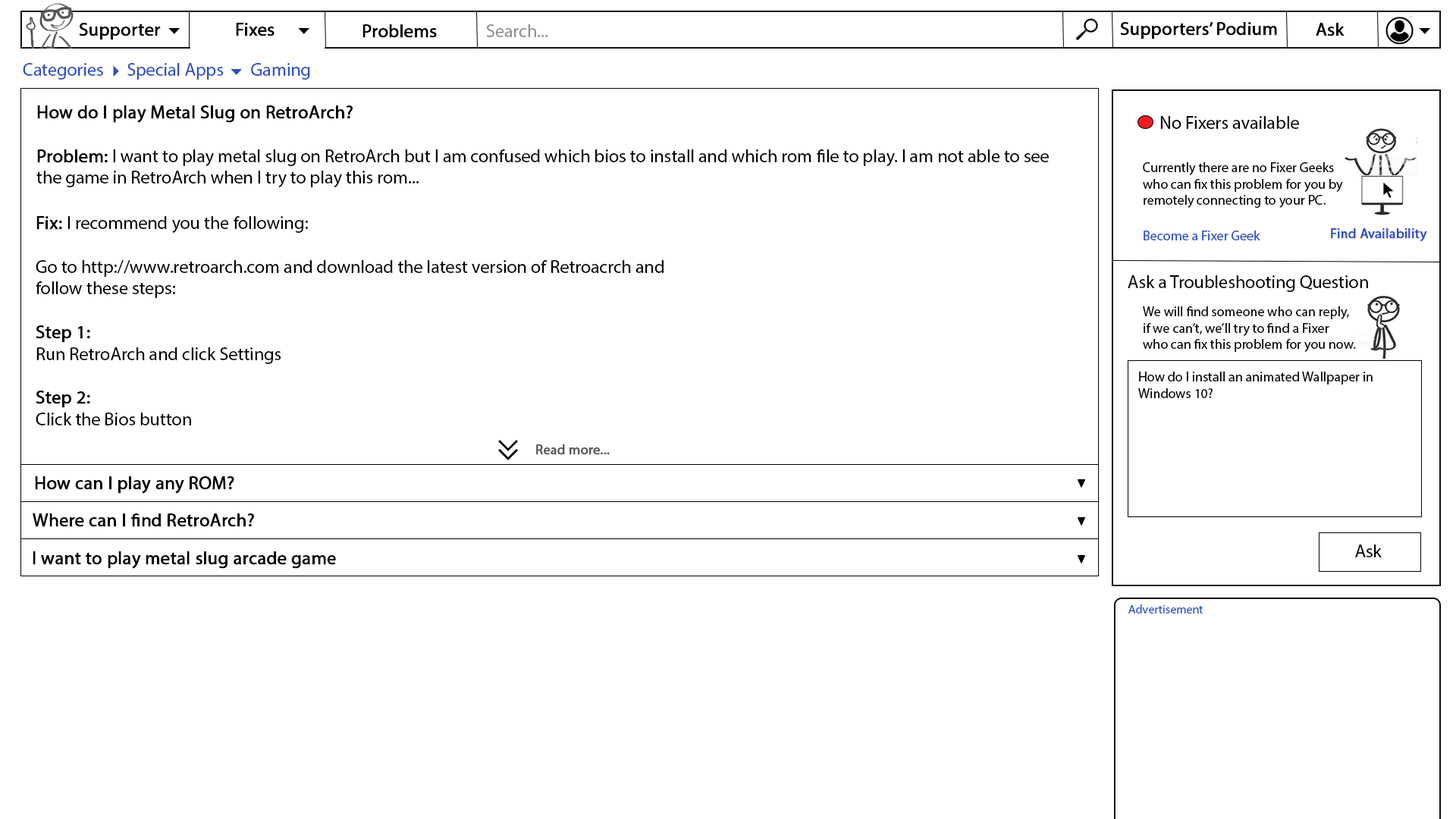
<style>
.page{position:relative;width:1456px;height:819px;background:#ffffff}
.page>*{position:absolute;margin:0}
.t1{font:18.2px "MyriadPro-Regular";color:#000000;font-weight:bold}
.t2{font:18.2px "MyriadPro-Regular";color:#919090}
.t3{font:18.2px "MyriadPro-Regular";color:#010000;font-weight:bold}
.t4{font:18.2px "MyriadPro-Regular";color:#2d4fc9}
.t5{font:18.2px "MyriadPro-Regular";color:#000000}
.t6{font:13.6px "MyriadPro-Regular";color:#000000}
.t7{font:13.6px "MyriadPro-Regular";color:#2d4fc9}
.t8{font:13.6px "MyriadPro-Regular";color:#2d4fc9;font-weight:bold}
.t9{font:13.6px "MyriadPro-Regular";color:#555555;font-weight:bold}
.t10{font:12.1px "MyriadPro-Regular";color:#2d4fc9}
</style>
<div class="page">
<p class="t1" style="left:79px;top:23px;width:82px;height:17px">Supporter</p>
<p class="t1" style="left:236px;top:23px;width:39px;height:13px">Fixes</p>
<p class="t1" style="left:362px;top:24px;width:75px;height:14px">Problems</p>
<p class="t2" style="left:486px;top:24px;width:62px;height:13px">Search...</p>
<p class="t3" style="left:1120px;top:22px;width:157px;height:17px">Supporters’ Podium</p>
<p class="t1" style="left:1316px;top:23px;width:29px;height:13px">Ask</p>
<p class="t4" style="left:23px;top:63px;width:287px;height:17px">Categories      Special Apps       Gaming</p>
<p class="t5" style="left:36px;top:105px;width:1013px;height:82px"><span class="t1">How do I play Metal Slug on RetroArch?<br><br>Problem:</span> I want to play metal slug on RetroArch but I am confused which bios to install and which rom file to play. I am not able to see<br>the game in RetroArch when I try to play this rom...</p>
<p class="t5" style="left:1160px;top:116px;width:139px;height:13px">No Fixers available</p>
<p class="t6" style="left:1143px;top:162px;width:200px;height:46px">Currently there are no Fixer Geeks<br>who can fix this problem for you by<br>remotely connecting to your PC.</p>
<p class="t5" style="left:36px;top:216px;width:628px;height:209px"><span class="t1">Fix: </span>I recommend you the following:<br><br>Go to http://www.retroarch.com and download the latest version of Retroacrch and<br>follow these steps:<br><br><span class="t1">Step 1:<br></span>Run RetroArch and click Settings<br><br><span class="t1">Step 2:<br></span>Click the Bios button</p>
<p class="t7" style="left:1144px;top:231px;width:116px;height:9px">Become a Fixer Geek</p>
<p class="t8" style="left:1331px;top:228px;width:96px;height:14px">Find Availability</p>
<p class="t5" style="left:1128px;top:275px;width:240px;height:17px">Ask a Troubleshooting Question</p>
<p class="t6" style="left:1143px;top:306px;width:213px;height:46px">We will find someone who can reply,<br>if we can’t, we’ll try to find a Fixer<br>who can fix this problem for you now.</p>
<p class="t6" style="left:1138px;top:372px;width:235px;height:26px">How do I install an animated Wallpaper in <br>Windows 10?</p>
<p class="t9" style="left:536px;top:444px;width:74px;height:11px">Read more...</p>
<p class="t1" style="left:35px;top:476px;width:199px;height:18px">How can I play any ROM?</p>
<p class="t1" style="left:33px;top:513px;width:221px;height:14px">Where can I find RetroArch?</p>
<p class="t5" style="left:1355px;top:544px;width:27px;height:13px">Ask</p>
<p class="t1" style="left:33px;top:551px;width:303px;height:18px">I want to play metal slug arcade game</p>
<p class="t10" style="left:1128px;top:604px;width:75px;height:9px">Advertisement</p>
</div>
